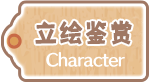
<style>
.page{position:relative;width:149px;height:82px;background:#ffffff}
.page>*{position:absolute;margin:0}
.t1{font:26.1px "shetumodengxiaofangti";color:#a07864;font-weight:bold;scale:0.94 1}
</style>
<div class="page">
<p class="t1" style="left:35px;top:20px;width:97px;height:25px">立绘鉴赏</p>
</div>
